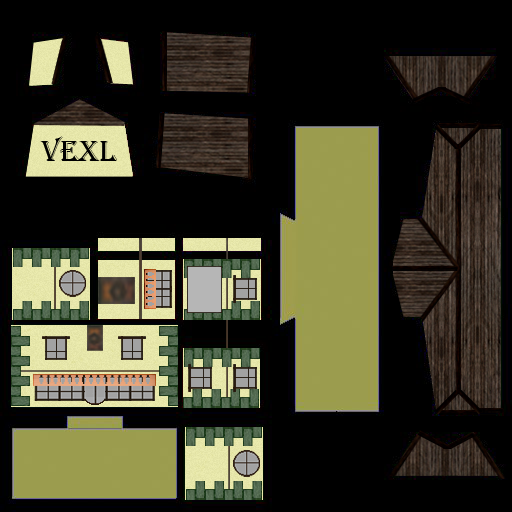
<style>
.page{position:relative;width:512px;height:512px;background:#000000}
.page>*{position:absolute;margin:0}
.t1{font:30px "Algerian";color:#000000}
</style>
<div class="page">
<p class="t1" style="left:40px;top:136px;width:77px;height:25px">VEXL</p>
</div>
